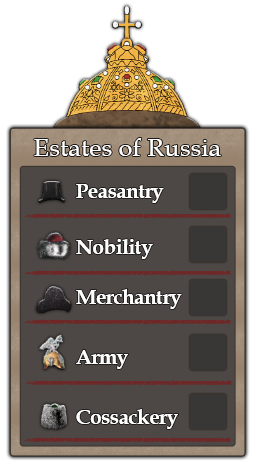
<style>
.page{position:relative;width:257px;height:468px;background:#ffffff}
.page>*{position:absolute;margin:0}
.t1{font:25.5px "BookAntiqua";color:#ffffff}
.t2{font:20.7px "BookAntiqua-Bold";letter-spacing:-0.025em;color:#ffffff}
</style>
<div class="page">
<p class="t1" style="left:34px;top:138px;width:187px;height:18px">Estates of Russia</p>
<p class="t1" style="left:34px;top:138px;width:187px;height:18px">Estates of Russia</p>
<p class="t2" style="left:76px;top:184px;width:88px;height:19px">Peasantry</p>
<p class="t2" style="left:76px;top:239px;width:77px;height:20px">Nobility</p>
<p class="t2" style="left:76px;top:289px;width:106px;height:20px">Merchantry</p>
<p class="t2" style="left:76px;top:350px;width:52px;height:19px">Army</p>
<p class="t2" style="left:76px;top:409px;width:102px;height:20px">Cossackery</p>
</div>
